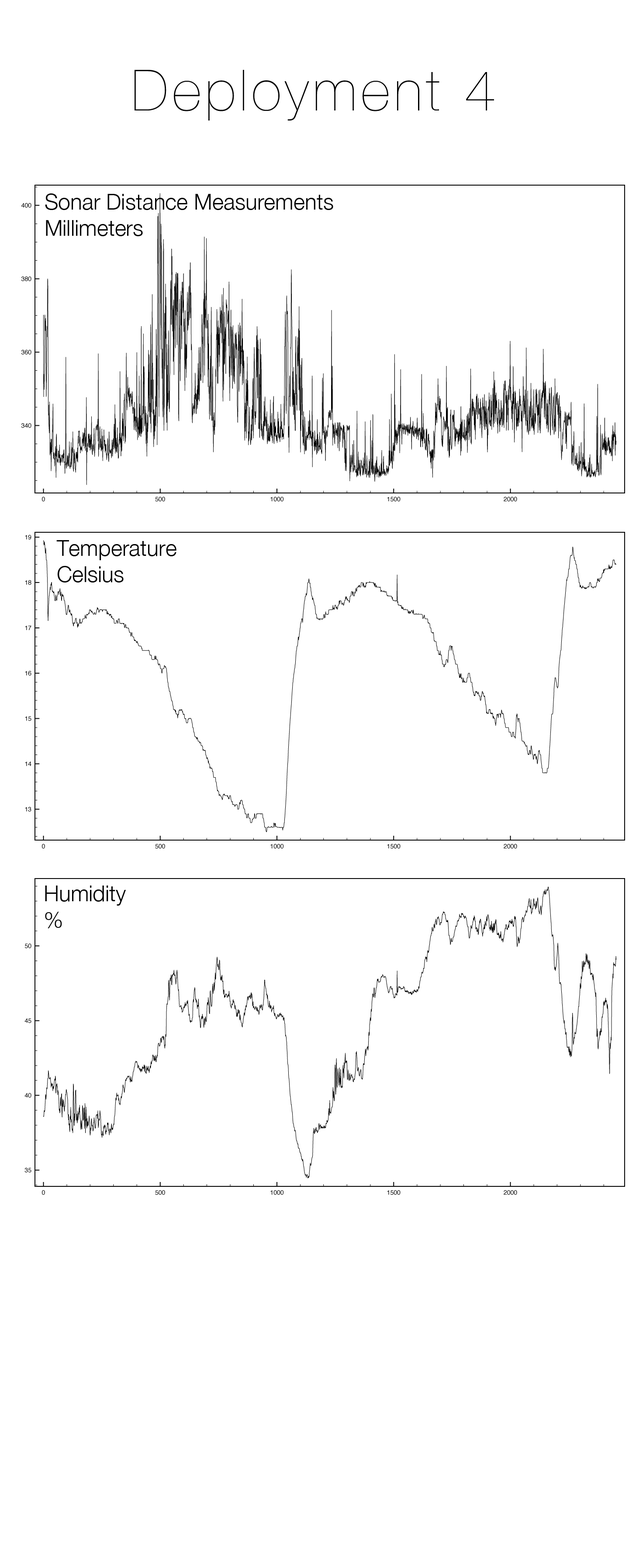
<style>
.page{position:relative;width:629px;height:1568px;background:#ffffff}
.page>*{position:absolute;margin:0}
.t1{font:56.8px "HelveticaNeue-UltraLight";letter-spacing:0.075em;color:#000000}
.t2{font:21.8px "HelveticaNeue-Light";color:#000000}
</style>
<div class="page">
<p class="t1" style="left:134px;top:70px;width:360px;height:51px">Deployment 4</p>
<p class="t2" style="left:45px;top:193px;width:288px;height:43px">Sonar Distance Measurements<br>Millimeters</p>
<p class="t2" style="left:56px;top:540px;width:120px;height:42px">Temperature<br>Celsius</p>
<p class="t2" style="left:45px;top:886px;width:81px;height:42px">Humidity<br>%</p>
</div>
